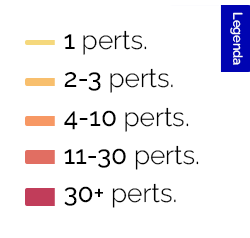
<style>
.page{position:relative;width:250px;height:238px;background:#ffffff}
.page>*{position:absolute;margin:0}
.t1{font:3.1px "Raleway-Medium";color:#ffffff}
.t2{font:25.7px/38.3px "Raleway-Light";color:#000000}
.t3{font:25.7px/38.3px "Raleway-Medium";color:#000000}
</style>
<div class="page">
<p class="t1" style="left:230px;top:12px;width:13px;height:53px;rotate:90deg">Legenda</p>
<p class="t2" style="left:64px;top:30px;width:135px;height:178px;text-align:justify"><span class="t3">1 </span>perts.<br><span class="t3">2-3 </span>perts.<br><span class="t3">4-10 </span>perts.<br><span class="t3">11-30 </span>perts.<br><span class="t3">30+ </span>perts.</p>
</div>
